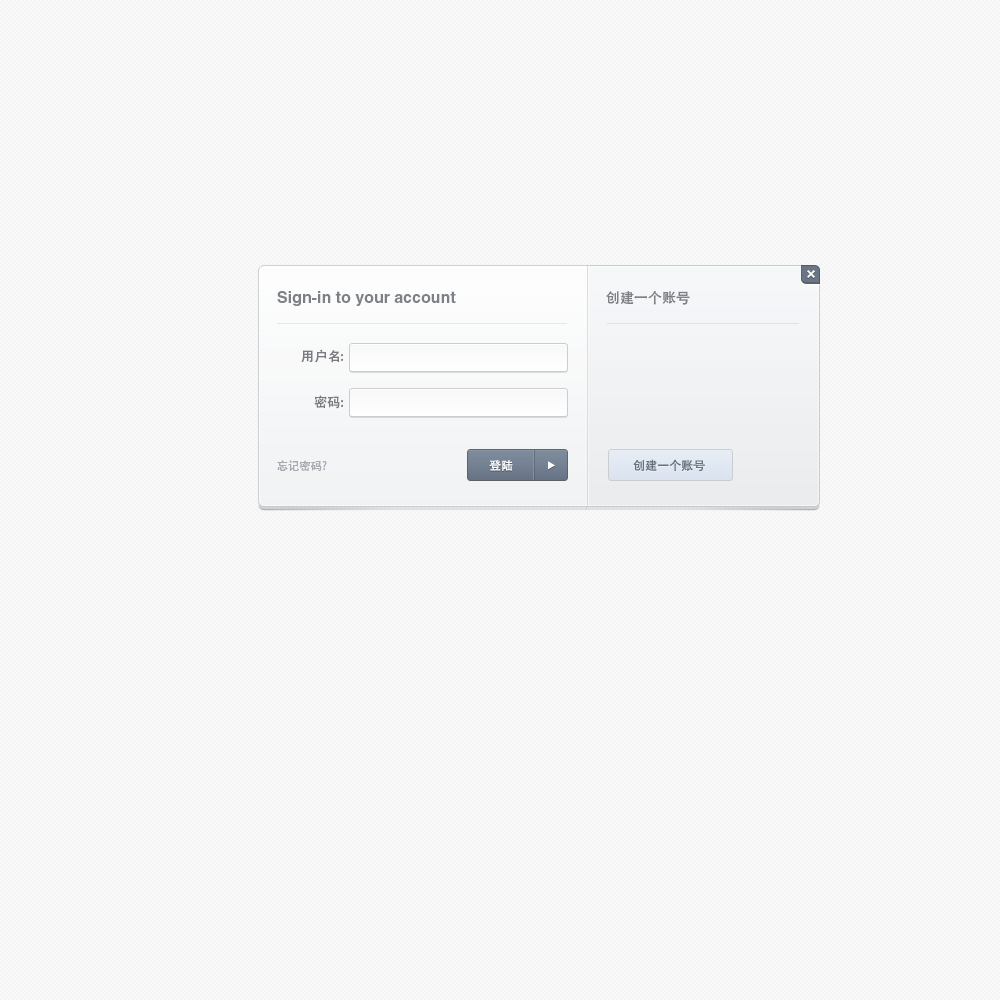
<style>
.page{position:relative;width:1000px;height:1000px;background:#f9f9f9}
.page>*{position:absolute;margin:0}
.t1{font:16px "HelveticaLTStd-Bold";color:#6d7179}
.t2{font:14px "AdobeHeitiStd-Regular";color:#6d7179}
.t3{font:13px "AdobeHeitiStd-Regular";letter-spacing:0.02em;color:#797b80}
.t4{font:11px "AdobeHeitiStd-Regular";letter-spacing:0.02em;color:#a8aaad}
.t5{font:12px "AdobeHeitiStd-Regular";color:#ffffff}
.t6{font:12px "AdobeHeitiStd-Regular";color:#66717e}
</style>
<div class="page">
<p class="t1" style="left:277px;top:291px;width:179px;height:15px">Sign-in to your account</p>
<p class="t2" style="left:606px;top:291px;width:84px;height:14px">创建一个账号</p>
<p class="t3" style="left:301px;top:349px;width:43px;height:14px">用户名:</p>
<p class="t3" style="left:314px;top:395px;width:30px;height:14px">密码:</p>
<p class="t4" style="left:277px;top:460px;width:50px;height:11px">忘记密码?</p>
<p class="t5" style="left:489px;top:460px;width:24px;height:11px">登陆</p>
<p class="t6" style="left:633px;top:459px;width:72px;height:13px">创建一个账号</p>
</div>
